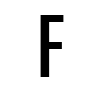
<style>
.page{position:relative;width:100px;height:100px;background:#ffffff}
.page>*{position:absolute;margin:0}
.t1{font:100px "TwCenMT-Condensed";color:#000000}
</style>
<div class="page">
<p class="t1" style="left:40px;top:15px;width:24px;height:62px">F</p>
</div>
